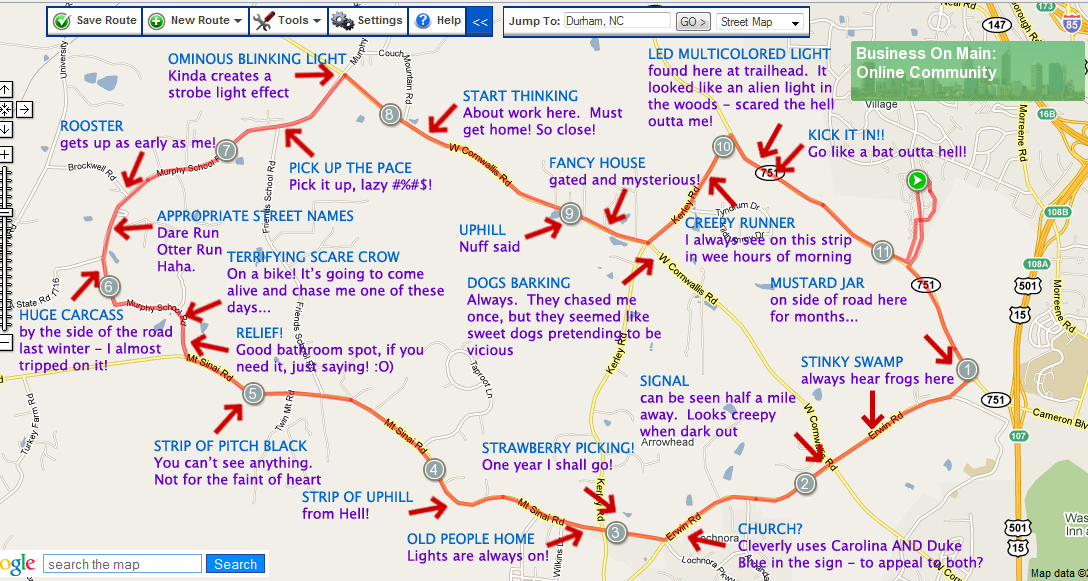
<style>
.page{position:relative;width:1088px;height:581px;background:#f2efe9}
.page>*{position:absolute;margin:0}
.t1{font:14px "LucidaSans";color:#6600cc}
.t2{font:14px "LucidaSans";color:#0066cc}
</style>
<div class="page">
<p class="t1" style="left:168px;top:53px;width:179px;height:48px"><span class="t2">OMINOUS BLINKING LIGHT<br></span>Kinda creates a <br>strobe light effect</p>
<p class="t1" style="left:648px;top:48px;width:186px;height:79px"><span class="t2">LED MULTICOLORED LIGHT </span>found here at trailhead.  It looked like an alien light in the woods - scared the hell outta me!</p>
<p class="t1" style="left:463px;top:90px;width:160px;height:48px"><span class="t2">START THINKING<br></span>About work here.  Must<br>get home! So close!</p>
<p class="t1" style="left:60px;top:120px;width:155px;height:31px"><span class="t2">ROOSTER<br></span>gets up as early as me!</p>
<p class="t1" style="left:808px;top:129px;width:158px;height:28px"><span class="t2">KICK IT IN!!<br></span>Go like a bat outta hell!</p>
<p class="t1" style="left:549px;top:157px;width:151px;height:31px"><span class="t2">FANCY HOUSE<br></span>gated and mysterious!</p>
<p class="t1" style="left:290px;top:162px;width:141px;height:31px"><span class="t2">PICK UP THE PACE<br></span>Pick it up, lazy #%#$!</p>
<p class="t2" style="left:157px;top:210px;width:197px;height:62px">APPROPRIATE STREET NAMES<br><span class="t1">Dare Run<br>Otter Run<br>Haha.</span></p>
<p class="t1" style="left:685px;top:217px;width:167px;height:48px"><span class="t2">CREEPY RUNNER<br></span>I always see on this strip<br>in wee hours of morning</p>
<p class="t1" style="left:460px;top:224px;width:60px;height:28px"><span class="t2">UPHILL<br></span>Nuff said</p>
<p class="t1" style="left:227px;top:251px;width:217px;height:64px"><span class="t2">TERRIFYING SCARE CROW<br></span>On a bike! It’s going to come<br>alive and chase me one of these days...</p>
<p class="t1" style="left:467px;top:277px;width:194px;height:79px"><span class="t2">DOGS BARKING<br></span>Always.  They chased me once, but they seemed like sweet dogs pretending to be vicious</p>
<p class="t1" style="left:770px;top:277px;width:137px;height:45px"><span class="t2">MUSTARD JAR<br></span>on side of road here <br>for months...</p>
<p class="t1" style="left:19px;top:309px;width:153px;height:64px"><span class="t2">HUGE CARCASS<br></span>by the side of the road<br>last winter - I almost<br>tripped on it!</p>
<p class="t1" style="left:236px;top:327px;width:187px;height:48px"><span class="t2">RELIEF!<br></span>Good bathroom spot, if you <br>need it, just saying! :O)</p>
<p class="t1" style="left:801px;top:356px;width:153px;height:31px"><span class="t2">STINKY SWAMP</span><br>always hear frogs here</p>
<p class="t1" style="left:640px;top:375px;width:156px;height:62px"><span class="t2">SIGNAL<br></span>can be seen half a mile away.  Looks creepy when dark out</p>
<p class="t1" style="left:154px;top:440px;width:167px;height:45px"><span class="t2">STRIP OF PITCH BLACK<br></span>You can’t see anything.<br>Not for the faint of heart</p>
<p class="t1" style="left:482px;top:442px;width:152px;height:31px"><span class="t2">STRAWBERRY PICKING!<br></span>One year I shall go!</p>
<p class="t2" style="left:302px;top:491px;width:111px;height:28px">STRIP OF UPHILL<br><span class="t1">from Hell!</span></p>
<p class="t1" style="left:407px;top:533px;width:141px;height:31px"><span class="t2">OLD PEOPLE HOME<br></span>Lights are always on!</p>
<p class="t1" style="left:738px;top:523px;width:245px;height:48px"><span class="t2">CHURCH?<br></span>Cleverly uses Carolina AND Duke Blue in the sign - to appeal to both?</p>
</div>
